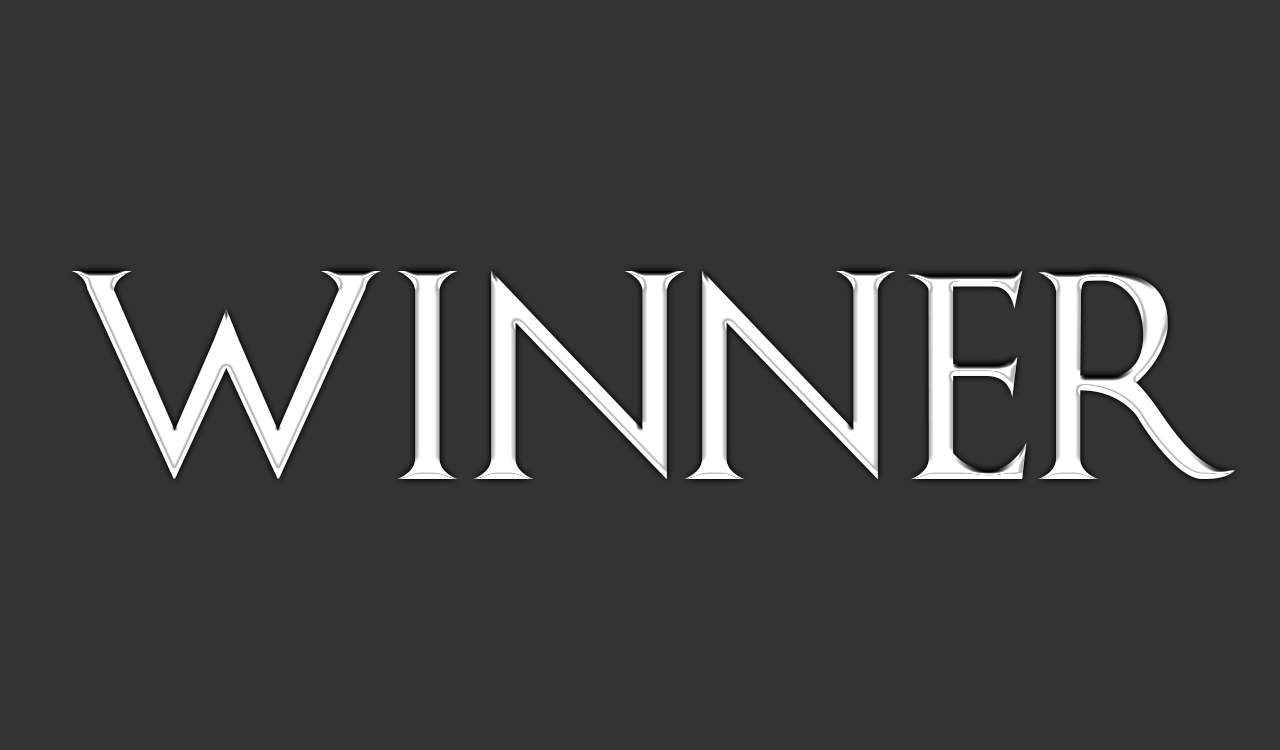
<style>
.page{position:relative;width:1280px;height:750px;background:#333333}
.page>*{position:absolute;margin:0}
.t1{font:208.3px "GameofThrones";color:#ffffff}
</style>
<div class="page">
<p class="t1" style="left:71px;top:270px;width:1164px;height:209px">Winner</p>
</div>
